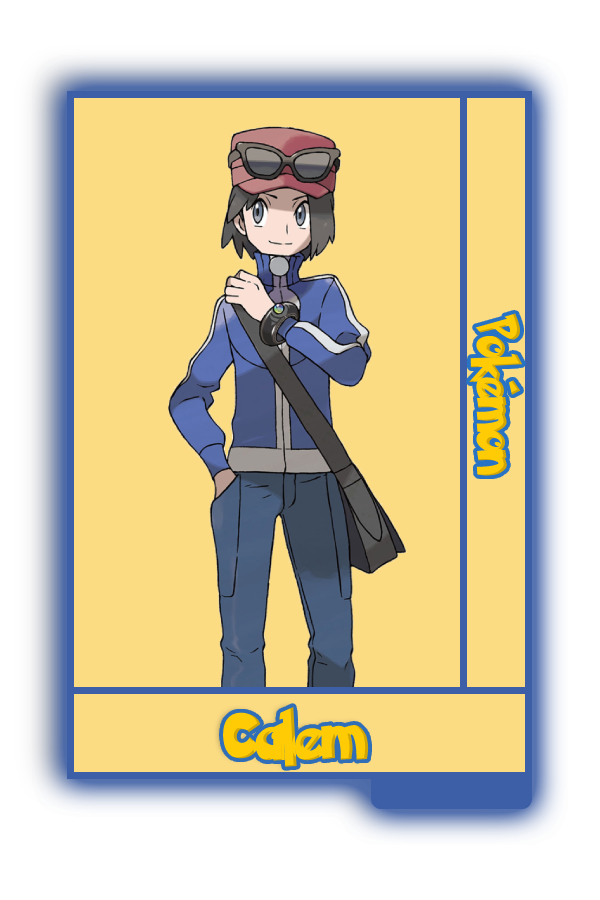
<style>
.page{position:relative;width:600px;height:900px;background:#fbdc83}
.page>*{position:absolute;margin:0}
.t1{font:48.8px "PokemonSolidNormal";color:#ffcb05;scale:0.8 1}
.t2{font:56.6px "PokemonSolidNormal";color:#ffcb05;scale:0.92 1}
</style>
<div class="page">
<p class="t1" style="left:469px;top:313px;width:54px;height:163px;rotate:90deg">Pokémon</p>
<p class="t2" style="left:223px;top:706px;width:146px;height:61px">Calem</p>
</div>
